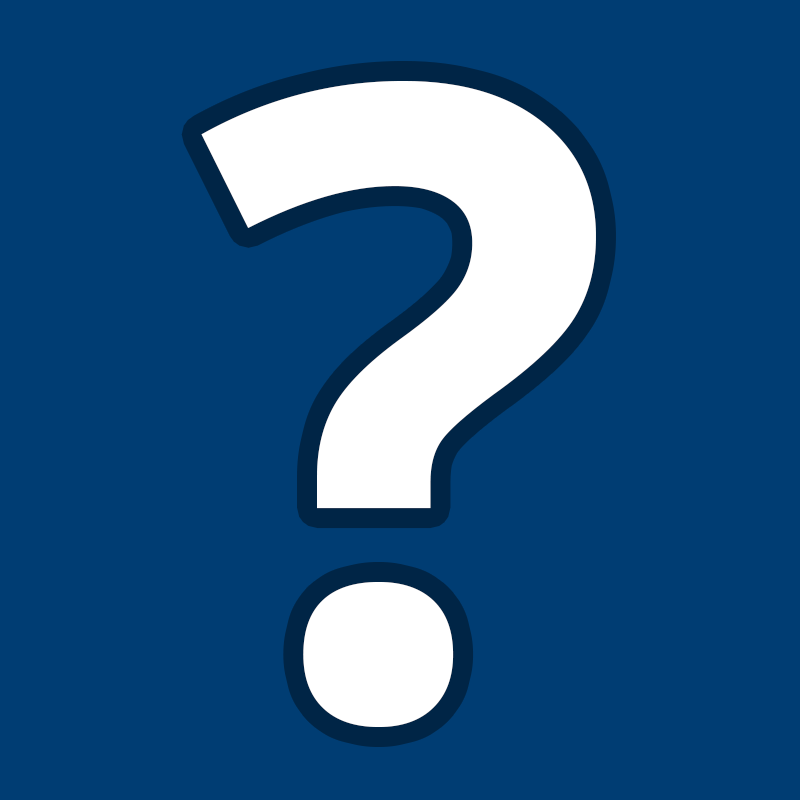
<style>
.page{position:relative;width:800px;height:800px;background:#003d73}
.page>*{position:absolute;margin:0}
.t1{font:876.5px "OpenSans-Bold";color:#ffffff}
</style>
<div class="page">
<p class="t1" style="left:201px;top:81px;width:395px;height:646px">?</p>
</div>
